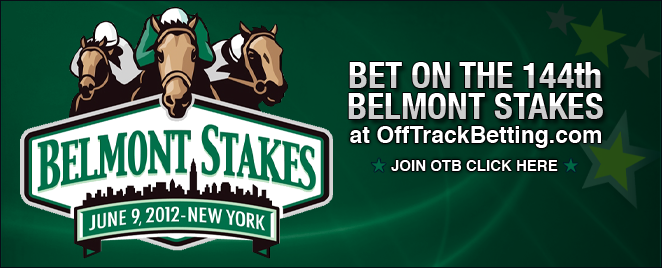
<style>
.page{position:relative;width:662px;height:268px}
.page>*{position:absolute;margin:0}
.t1{font:36px "HelveticaNeue-CondensedBold"}
.t2{font:23px "Helvetica-Bold";color:#ffffff}
.t3{font:15px "Helvetica-Bold";color:#ffffff}
</style>
<div class="page">
<p class="t1" style="left:349px;top:62px;width:252px;height:26px">BET ON THE 144th</p>
<p class="t1" style="left:348px;top:93px;width:255px;height:26px">BELMONT STAKES</p>
<p class="t2" style="left:350px;top:126px;width:251px;height:22px">at OffTrackBetting.com</p>
<p class="t3" style="left:391px;top:160px;width:167px;height:11px">JOIN OTB CLICK HERE</p>
</div>
